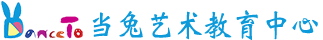
<style>
.page{position:relative;width:323px;height:40px;background:#ffffff}
.page>*{position:absolute;margin:0}
.t1{font:32px "WeibeiSC-Bold";letter-spacing:0.01em;color:#0d9ada;scale:0.9 1}
</style>
<div class="page">
<p class="t1" style="left:92px;top:10px;width:226px;height:30px">当兔艺术教育中心</p>
</div>
